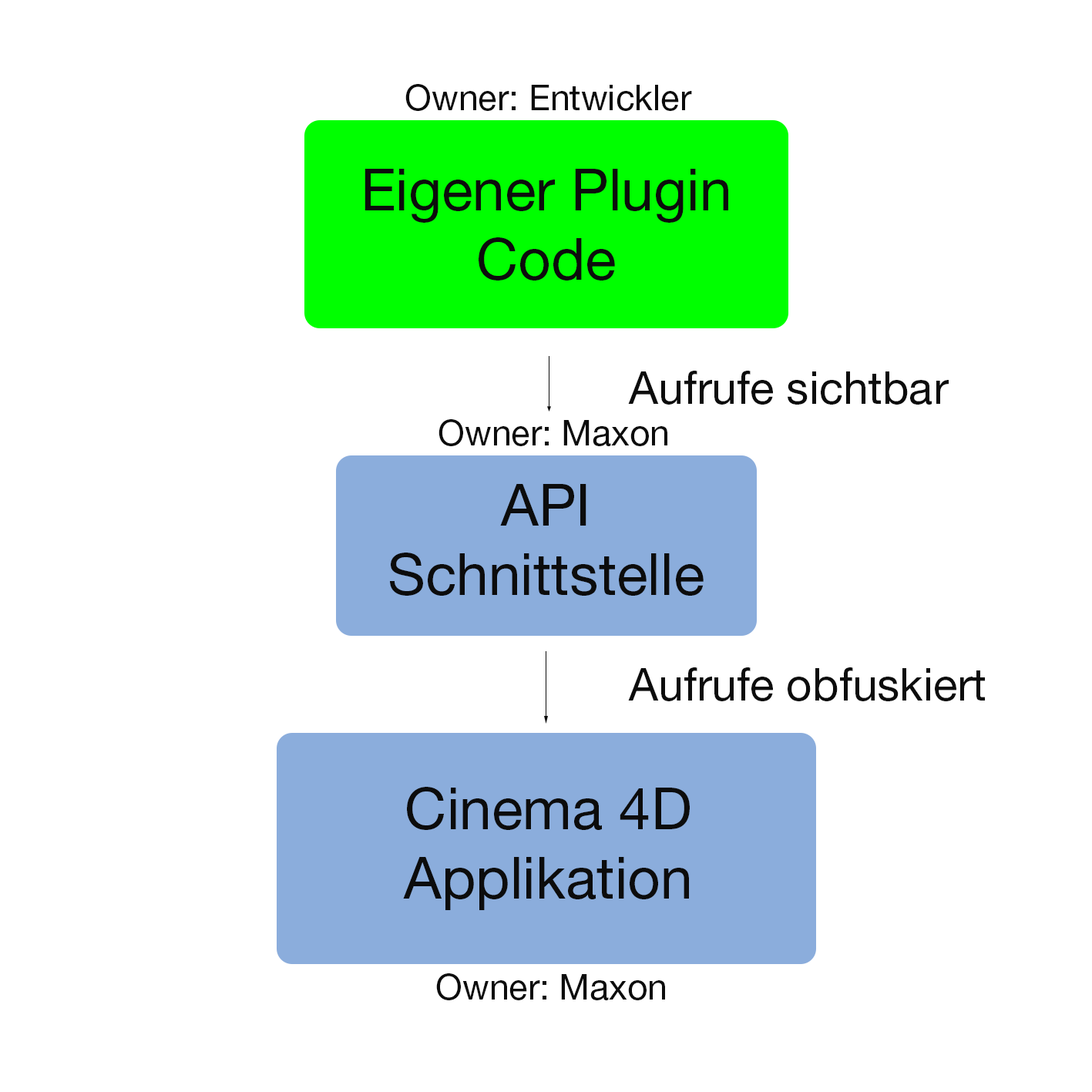
<style>
.page{position:relative;width:1092px;height:1092px;background:#ffffff}
.page>*{position:absolute;margin:0}
.t1{font:35.3px "HelveticaNeueLTPro-Roman";color:#0c0c0c}
.t2{font:57.8px "HelveticaNeueLTPro-Roman";color:#0c0c0c}
.t3{font:45px "HelveticaNeueLTPro-Roman";color:#0c0c0c}
</style>
<div class="page">
<p class="t1" style="left:405px;top:84px;width:287px;height:27px">Owner: Entwickler</p>
<p class="t2" style="left:365px;top:169px;width:363px;height:112px;text-align:center">Eigener Plugin<br>Code</p>
<p class="t3" style="left:628px;top:371px;width:321px;height:34px">Aufrufe sichtbar</p>
<p class="t1" style="left:438px;top:419px;width:229px;height:27px">Owner: Maxon</p>
<p class="t2" style="left:390px;top:484px;width:314px;height:112px;text-align:center">API<br>Schnittstelle</p>
<p class="t3" style="left:628px;top:667px;width:357px;height:34px">Aufrufe obfuskiert</p>
<p class="t2" style="left:403px;top:787px;width:287px;height:123px;text-align:center">Cinema 4D<br>Applikation</p>
<p class="t1" style="left:436px;top:973px;width:229px;height:27px">Owner: Maxon</p>
</div>
